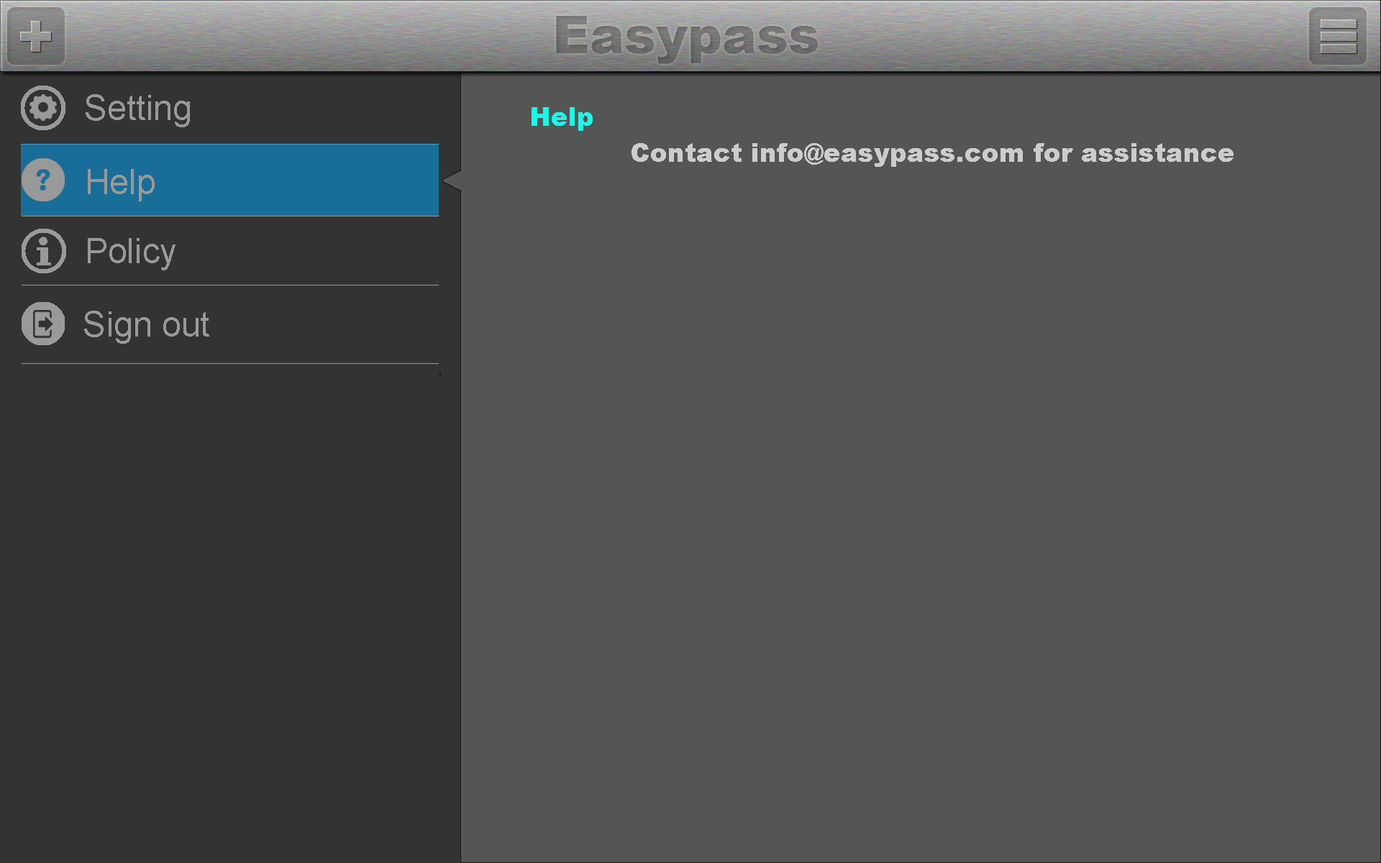
<style>
.page{position:relative;width:1381px;height:863px;background:#555555}
.page>*{position:absolute;margin:0}
.t1{font:34.5px "ArialMT";color:#999999}
.t2{font:25.9px "Arial-Black";color:#1bfae8}
.t3{font:25.9px "Arial-Black";color:#cccccc}
</style>
<div class="page">
<p class="t1" style="left:86px;top:94px;width:104px;height:33px">Setting</p>
<p class="t2" style="left:532px;top:107px;width:61px;height:24px">Help</p>
<p class="t3" style="left:632px;top:143px;width:602px;height:24px">Contact info@easypass.com for assistance</p>
<p class="t1" style="left:88px;top:169px;width:67px;height:32px">Help</p>
<p class="t1" style="left:88px;top:238px;width:88px;height:32px">Policy</p>
<p class="t1" style="left:84px;top:311px;width:125px;height:33px">Sign out</p>
</div>
